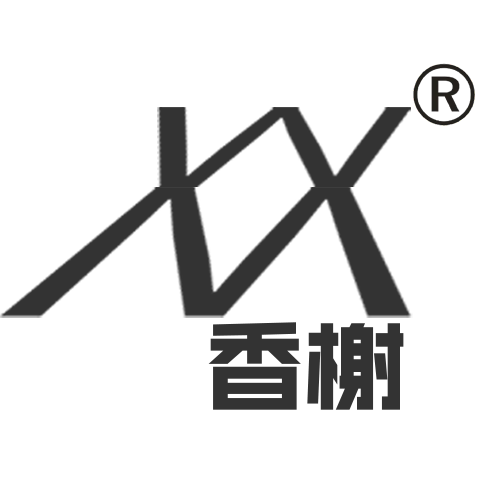
<style>
.page{position:relative;width:500px;height:500px;background:#ffffff}
.page>*{position:absolute;margin:0}
.t1{font:101.3px "BigruixianBlackGBV1.0";color:#333333}
</style>
<div class="page">
<p class="t1" style="left:208px;top:322px;width:196px;height:88px">香榭</p>
</div>
